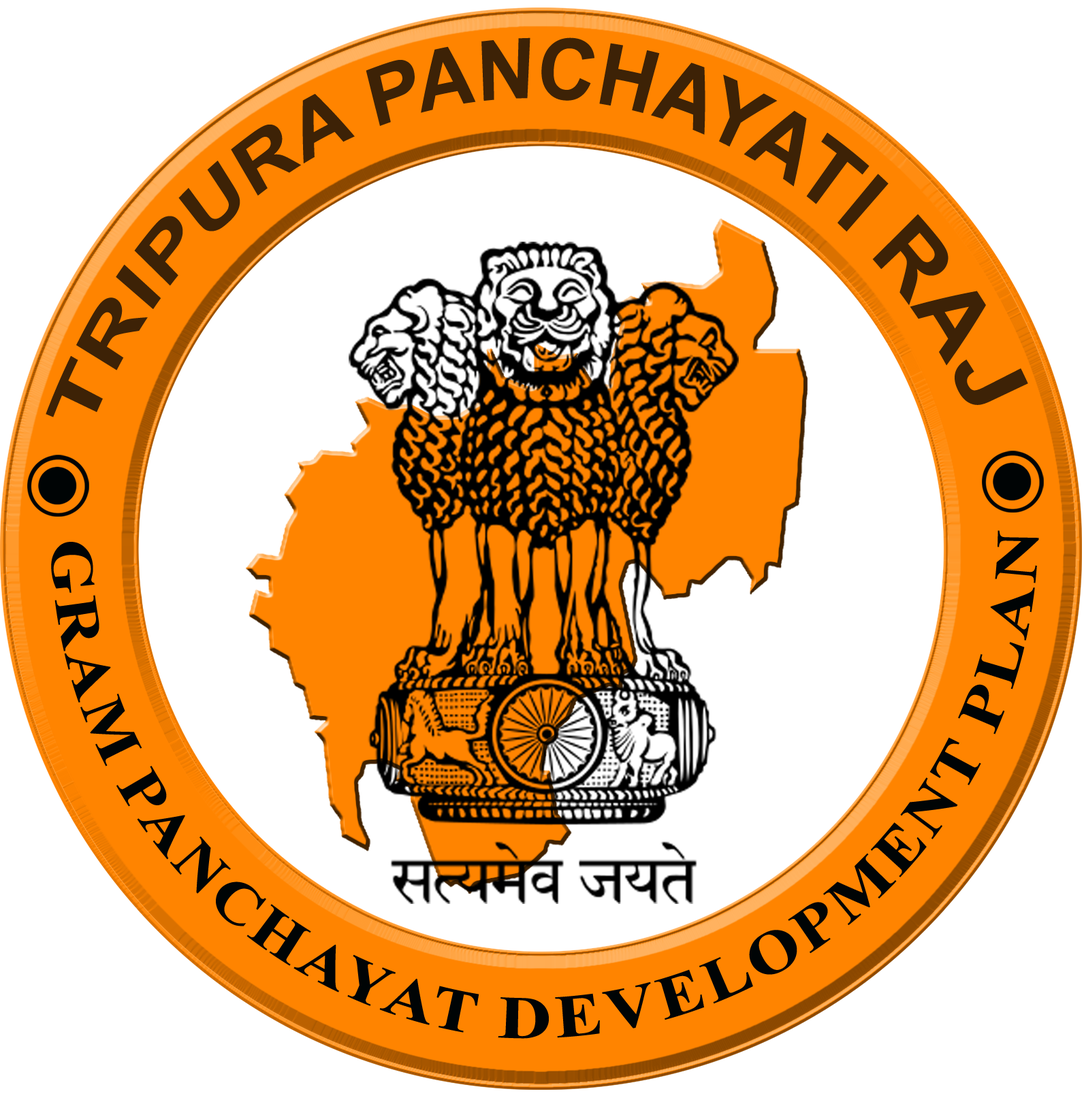
<style>
.page{position:relative;width:1084px;height:1100px;background:#ffffff}
.page>*{position:absolute;margin:0}
.t1{font:69.8px "Arial-BoldMT";color:#3d2206;text-transform:uppercase;scale:0.84 1}
.t2{font:60.5px "TimesNewRomanPS-BoldMT";color:#000405;text-transform:uppercase}
</style>
<div class="page">
<p class="t1" style="left:46px;top:37px;width:982px;height:380px;rotate:-1deg">Tripura Panchayati Raj</p>
<p class="t2" style="left:498px;top:530px;width:541px;height:509px;rotate:-43deg">Development Plan</p>
<p class="t2" style="left:51px;top:542px;width:428px;height:491px;rotate:49deg">Gram Panchayat</p>
</div>
